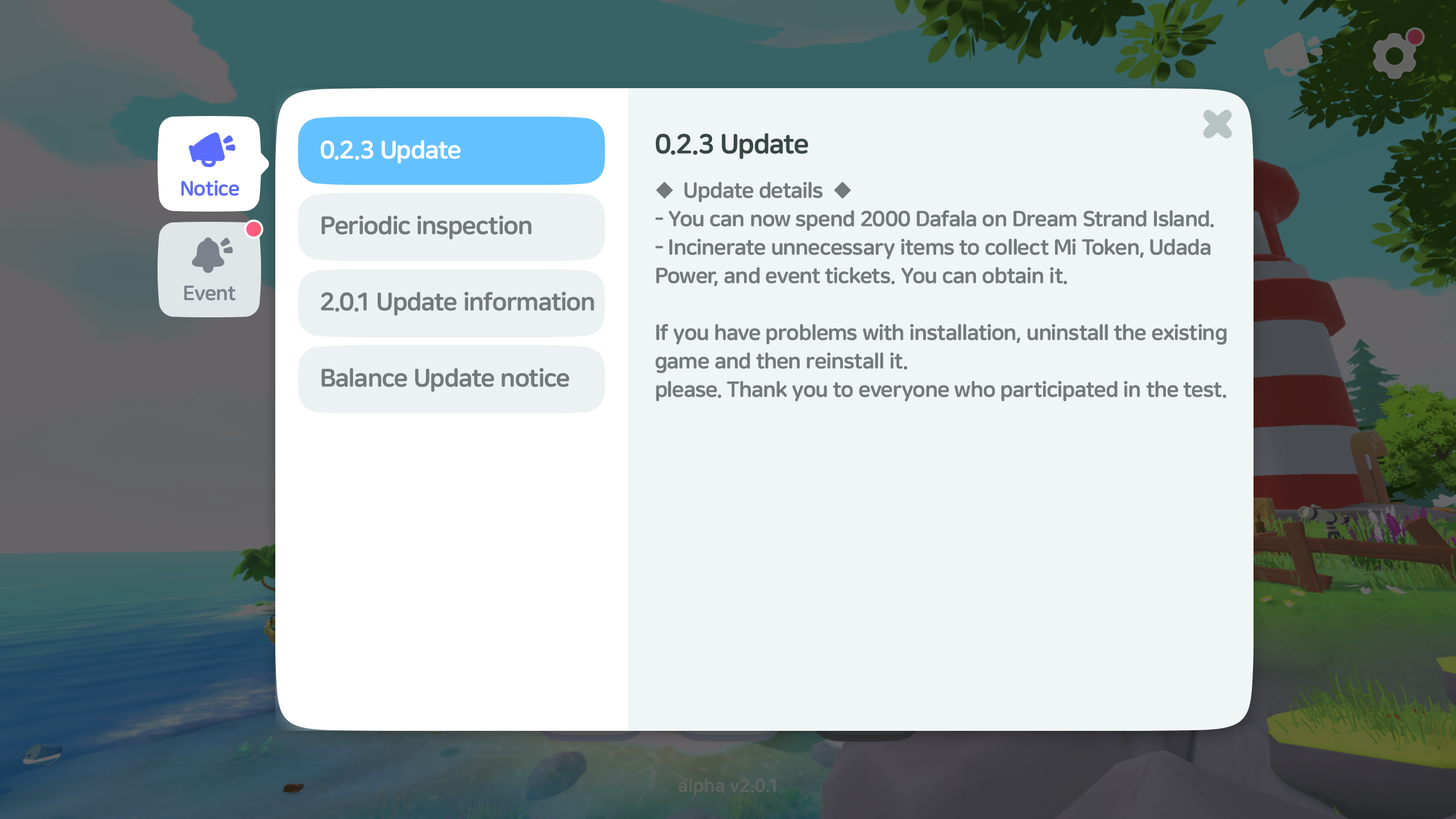
<style>
.page{position:relative;width:1456px;height:819px;background:#f0f6f6}
.page>*{position:absolute;margin:0}
.t1{font:27.3px "NanumSquareRoundEB";letter-spacing:-0.025em;color:#384742}
.t2{font:25px "NanumSquareRoundEB";letter-spacing:-0.025em;color:#ffffff}
.t3{font:20.5px "NanumSquareRoundEB";letter-spacing:-0.025em;color:#5c6cfc}
.t4{font:21.6px/28.4px "NanumSquareRoundEB";letter-spacing:-0.025em;color:#727a7b}
.t5{font:25px "NanumSquareRoundEB";letter-spacing:-0.025em;color:#727a7b}
.t6{font:20.5px "NanumSquareRoundEB";letter-spacing:-0.025em;color:#7d818c}
</style>
<div class="page">
<p class="t1" style="left:656px;top:133px;width:152px;height:26px">0.2.3 Update</p>
<p class="t2" style="left:321px;top:140px;width:140px;height:24px">0.2.3 Update</p>
<p class="t3" style="left:181px;top:180px;width:58px;height:16px">Notice</p>
<p class="t4" style="left:655px;top:181px;width:572px;height:221px">◆  Update details  ◆<br>- You can now spend 2000 Dafala on Dream Strand Island.<br>- Incinerate unnecessary items to collect Mi Token, Udada<br>Power, and event tickets. You can obtain it.<br><br>If you have problems with installation, uninstall the existing<br>game and then reinstall it.<br>please. Thank you to everyone who participated in the test.</p>
<p class="t5" style="left:321px;top:216px;width:211px;height:23px">Periodic inspection</p>
<p class="t6" style="left:184px;top:286px;width:51px;height:15px">Event</p>
<p class="t5" style="left:321px;top:292px;width:273px;height:24px">2.0.1 Update information</p>
<p class="t5" style="left:321px;top:368px;width:248px;height:24px">Balance Update notice</p>
</div>
